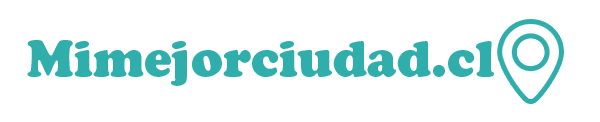
<style>
.page{position:relative;width:600px;height:122px;background:#ffffff}
.page>*{position:absolute;margin:0}
.t1{font:50.1px "CooperBlackStd";color:#2faeac}
</style>
<div class="page">
<p class="t1" style="left:27px;top:40px;width:467px;height:46px">Mimejorciudad.cl</p>
</div>
